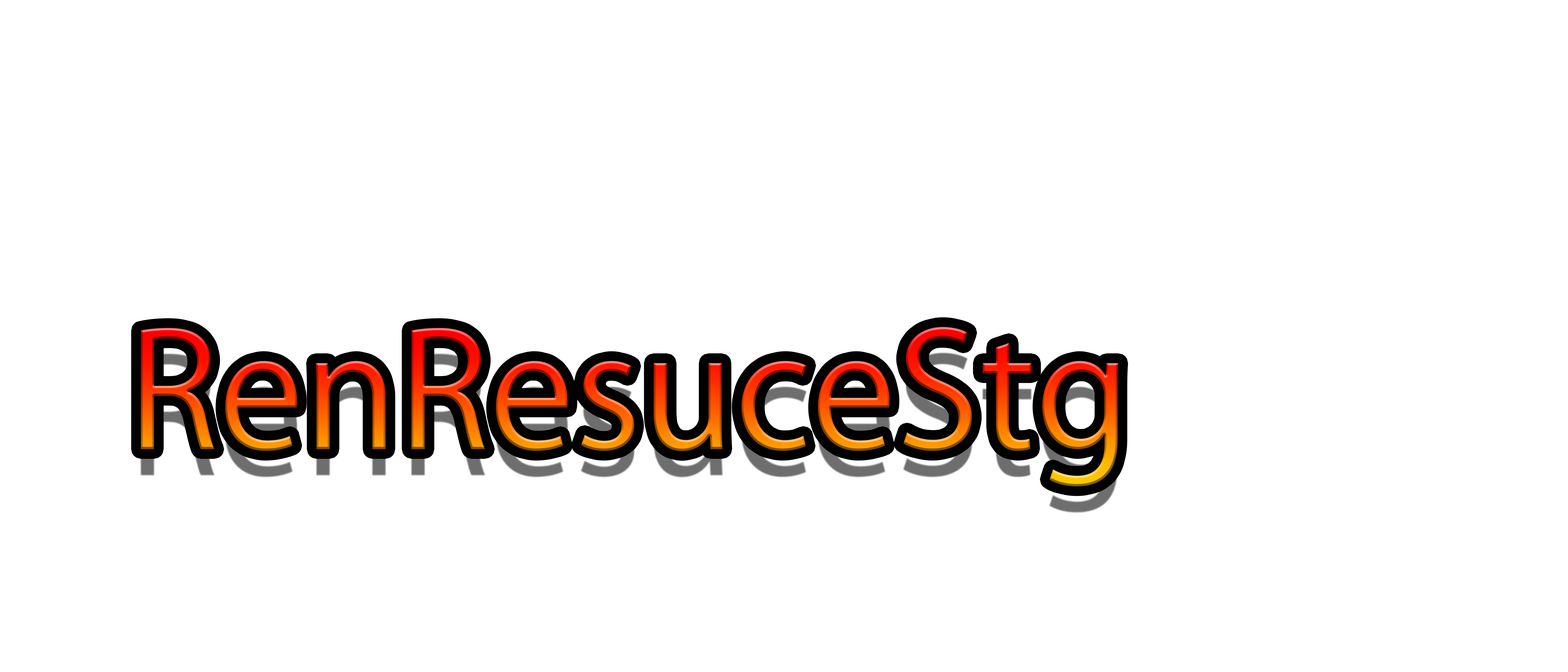
<style>
.page{position:relative;width:1568px;height:672px;background:#ffffff}
.page>*{position:absolute;margin:0}
.t1{font:158px "KozGoPr6N-Regular"}
</style>
<div class="page">
<p class="t1" style="left:141px;top:327px;width:978px;height:159px">RenResuceStg</p>
</div>
